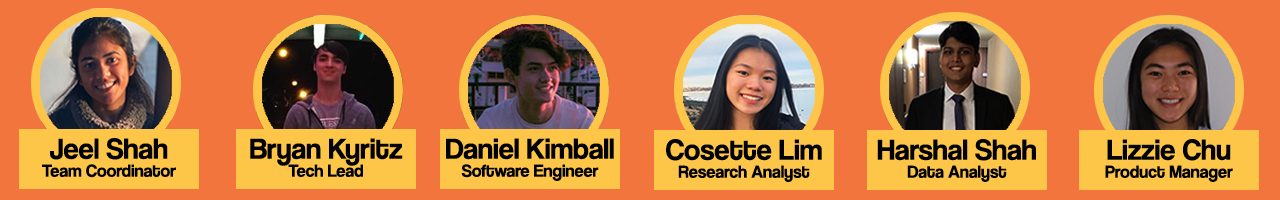
<style>
.page{position:relative;width:1280px;height:200px;background:#f1753c}
.page>*{position:absolute;margin:0}
.t1{font:18px/18px "CoolveticaRg-Regular";color:#000000}
.t2{font:30px/16px "CoolveticaRg-Regular";color:#000000}
.t3{font:30px/18px "CoolveticaRg-Regular";color:#000000}
</style>
<div class="page">
<p class="t1" style="left:42px;top:138px;width:134px;height:40px;text-align:center"><span class="t2">Jeel Shah<br></span>Team Coordinator</p>
<p class="t2" style="left:250px;top:138px;width:153px;height:39px;text-align:center">Bryan Kyritz<br><span class="t1">Tech Lead</span></p>
<p class="t1" style="left:446px;top:138px;width:168px;height:43px;text-align:center"><span class="t2">Daniel Kimball<br></span>Software Engineer</p>
<p class="t1" style="left:666px;top:139px;width:156px;height:43px;text-align:center"><span class="t2">Cosette Lim<br></span>Research Analyst</p>
<p class="t3" style="left:877px;top:139px;width:159px;height:43px;text-align:center">Harshal Shah<br><span class="t1">Data Analyst</span></p>
<p class="t1" style="left:1105px;top:139px;width:128px;height:43px;text-align:center"><span class="t2">Lizzie Chu<br></span>Product Manager</p>
</div>
